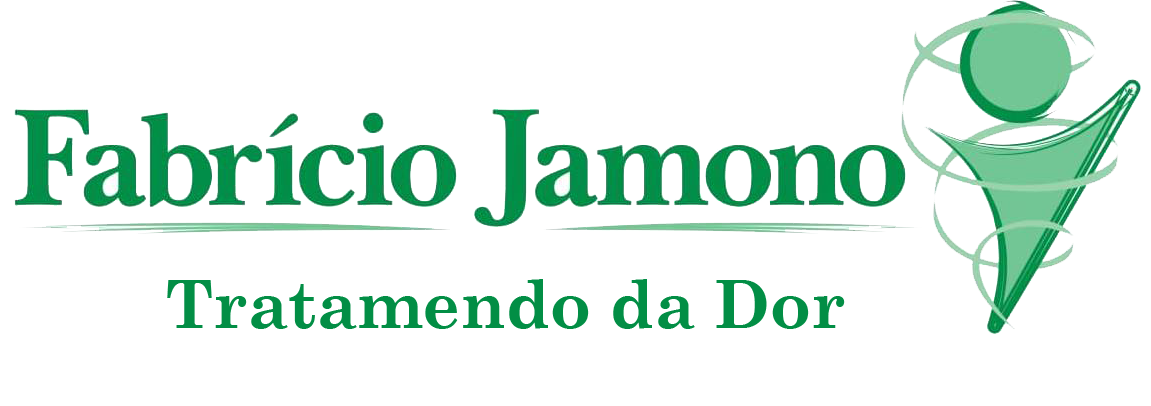
<style>
.page{position:relative;width:1151px;height:406px;background:#ffffff}
.page>*{position:absolute;margin:0}
.t1{font:66.7px "CenturySchoolbook-Bold";color:#028e45}
</style>
<div class="page">
<p class="t1" style="left:167px;top:279px;width:678px;height:50px">Tratamendo da Dor</p>
</div>
